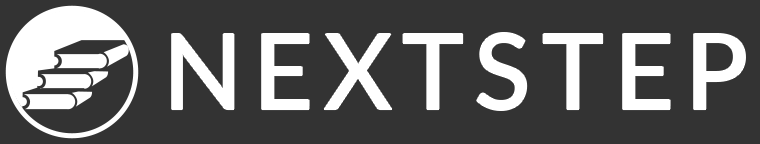
<style>
.page{position:relative;width:760px;height:144px;background:#333333}
.page>*{position:absolute;margin:0}
.t1{font:105px "Lato-Medium";letter-spacing:0.1em;color:#ffffff}
</style>
<div class="page">
<p class="t1" style="left:172px;top:33px;width:573px;height:77px">NEXTSTEP</p>
</div>
